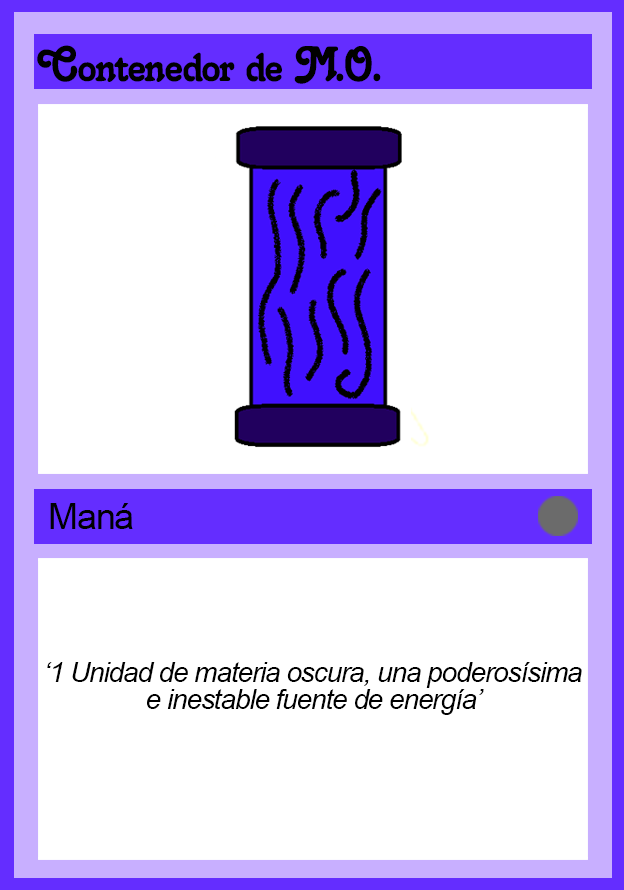
<style>
.page{position:relative;width:624px;height:890px;background:#ffffff}
.page>*{position:absolute;margin:0}
.t1{font:48px "Salina";letter-spacing:-0.04em;color:#000000}
.t2{font:36px "ArialMT";letter-spacing:-0.04em;color:#000000}
.t3{font:28px/27px "Arial-ItalicMT";letter-spacing:-0.04em;color:#000000}
</style>
<div class="page">
<p class="t1" style="left:37px;top:45px;width:344px;height:39px">Contenedor de M.O.</p>
<p class="t2" style="left:50px;top:503px;width:83px;height:26px">Maná</p>
<p class="t3" style="left:47px;top:662px;width:535px;height:53px;text-align:center">‘1 Unidad de materia oscura, una poderosísima e inestable fuente de energía’</p>
</div>
